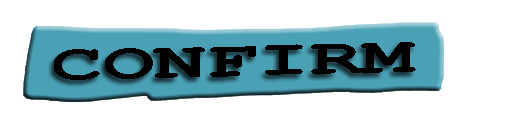
<style>
.page{position:relative;width:512px;height:128px;background:#ffffff}
.page>*{position:absolute;margin:0}
.t1{font:50px "CourierNewPS-BoldMT";color:#000000;scale:1.73 1}
</style>
<div class="page">
<p class="t1" style="left:54px;top:42px;width:362px;height:38px;rotate:-1deg">CONFIRM</p>
</div>
